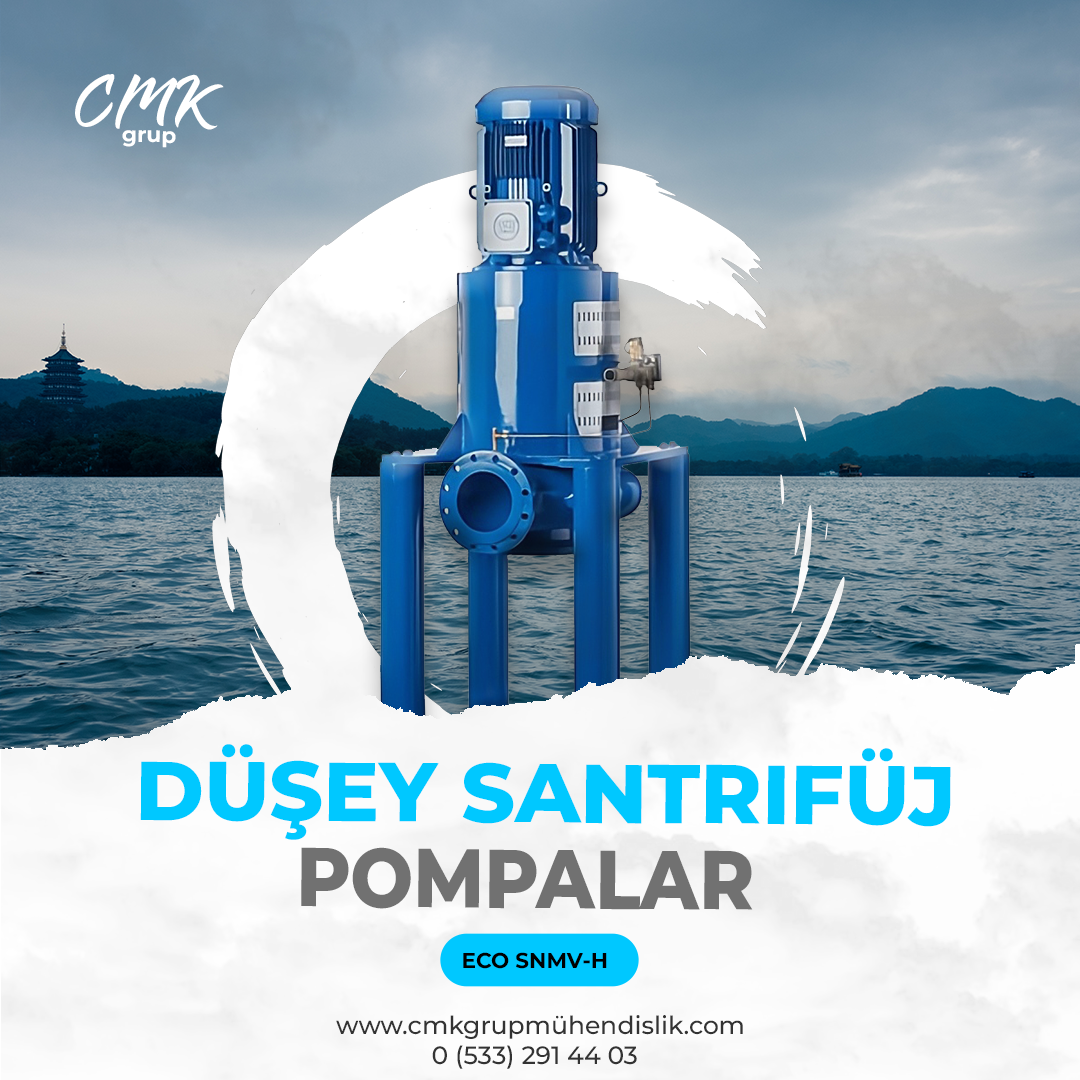
<style>
.page{position:relative;width:1080px;height:1080px}
.page>*{position:absolute;margin:0}
.t1{font:68.1px "Tahu!";color:#ffffff}
.t2{font:21.8px "Montserrat-Bold";color:#ffffff}
.t3{font:83.3px "Montserrat-ExtraBold";color:#00c8ff;text-transform:uppercase}
.t4{font:83.3px "Montserrat-ExtraBold";color:#717171;scale:0.89 1}
.t5{font:21.6px "Montserrat-Bold";color:#000000}
.t6{font:25px "Montserrat-Medium";color:#333333}
</style>
<div class="page">
<p class="t1" style="left:75px;top:74px;width:149px;height:56px">CMK</p>
<p class="t2" style="left:122px;top:130px;width:54px;height:18px">grup</p>
<p class="t3" style="left:140px;top:744px;width:811px;height:96px">Düşey Santrifüj</p>
<p class="t4" style="left:301px;top:847px;width:452px;height:63px">POMPALAR</p>
<p class="t5" style="left:463px;top:952px;width:144px;height:17px">ECO SNMV-H</p>
<p class="t6" style="left:336px;top:1015px;width:407px;height:24px">www.cmkgrupmühendislik.com</p>
<p class="t6" style="left:432px;top:1045px;width:205px;height:24px">0 (533) 291 44 03</p>
</div>
